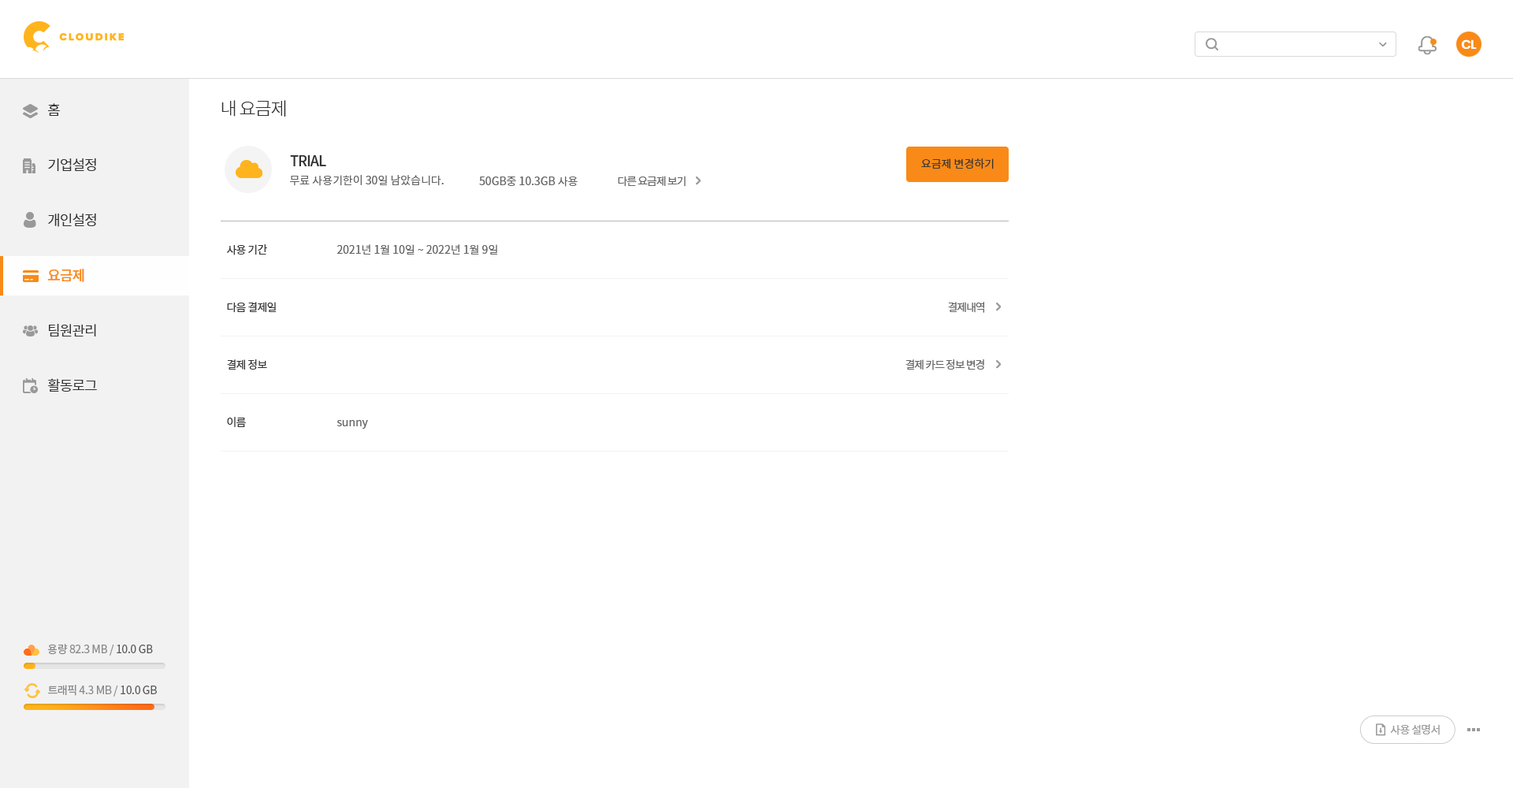
<style>
.page{position:relative;width:1513px;height:788px;background:#ffffff}
.page>*{position:absolute;margin:0}
.t1{font:12.6px "Poppins-SemiBold";letter-spacing:-0.05em;color:#ffffff}
.t2{font:18.1px "NotoSansCJKkr-Light";letter-spacing:-0.05em;color:#333333}
.t3{font:14.2px/55.2px "NotoSansCJKkr-DemiLight";letter-spacing:-0.05em;color:#333333}
.t4{font:14.2px/55.2px "NotoSansCJKkr-Medium";letter-spacing:-0.05em;color:#f98a17}
.t5{font:14.2px "NotoSansCJKkr-Medium";letter-spacing:-0.05em;color:#333333}
.t6{font:11px "NotoSansCJKkr-DemiLight";color:#333333}
.t7{font:11px "NotoSansCJKkr-Regular";color:#666666}
.t8{font:11px "NotoSansCJKkr-Regular";letter-spacing:-0.075em;color:#666666}
.t9{font:11px "NotoSansCJKkr-Regular";letter-spacing:-0.05em;color:#333333}
.t10{font:11px "NotoSansCJKkr-Regular";letter-spacing:-0.025em;color:#888888}
.t11{font:11px "NotoSansCJKkr-Regular";letter-spacing:-0.025em;color:#585858}
.t12{font:11px "NotoSansCJKkr-Regular";letter-spacing:-0.05em;color:#999999}
</style>
<div class="page">
<p class="t1" style="left:1461px;top:39px;width:16px;height:10px">CL</p>
<p class="t2" style="left:221px;top:100px;width:65px;height:17px">내 요금제</p>
<p class="t3" style="left:47px;top:103px;width:50px;height:289px">홈<br>기업설정<br>개인설정<br><span class="t4">요금제<br></span>팀원관리<br>활동로그</p>
<p class="t5" style="left:290px;top:155px;width:36px;height:11px">TRIAL</p>
<p class="t6" style="left:921px;top:158px;width:73px;height:11px">요금제 변경하기</p>
<p class="t7" style="left:290px;top:175px;width:154px;height:11px">무료 사용기한이 30일 남았습니다.</p>
<p class="t7" style="left:479px;top:177px;width:99px;height:10px">50GB중 10.3GB 사용</p>
<p class="t8" style="left:618px;top:176px;width:68px;height:11px">다른 요금제 보기</p>
<p class="t9" style="left:227px;top:244px;width:40px;height:11px">사용 기간</p>
<p class="t7" style="left:337px;top:244px;width:160px;height:11px">2021년 1월 10일 ~ 2022년 1월 9일</p>
<p class="t9" style="left:227px;top:302px;width:49px;height:11px">다음 결제일</p>
<p class="t8" style="left:948px;top:302px;width:36px;height:11px">결제내역</p>
<p class="t9" style="left:227px;top:359px;width:40px;height:11px">결제 정보</p>
<p class="t8" style="left:905px;top:359px;width:79px;height:11px">결제 카드 정보 변경</p>
<p class="t9" style="left:227px;top:417px;width:19px;height:10px">이름</p>
<p class="t7" style="left:337px;top:420px;width:31px;height:9px">sunny</p>
<p class="t10" style="left:47px;top:644px;width:106px;height:12px">용량 82.3 MB / <span class="t11">10.0 GB</span></p>
<p class="t10" style="left:48px;top:685px;width:109px;height:12px">트래픽 4.3 MB / <span class="t11">10.0 GB</span></p>
<p class="t12" style="left:1390px;top:724px;width:50px;height:11px">사용 설명서</p>
</div>
